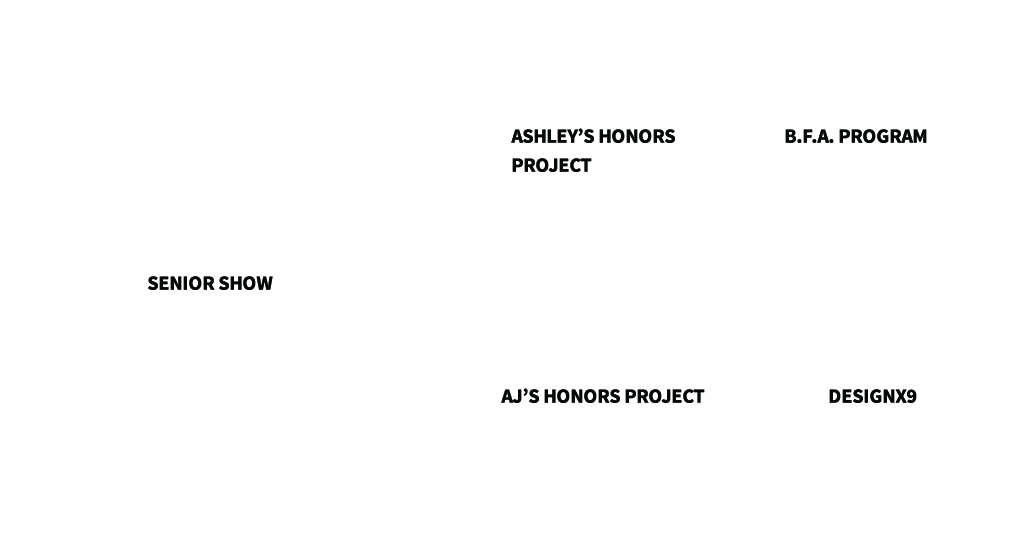
<style>
.page{position:relative;width:1024px;height:560px;background:#ffffff}
.page>*{position:absolute;margin:0}
.t1{font:20px/29px "SourceSansPro-Bold";color:#060808}
.t2{font:20px "SourceSansPro-Bold";color:#060808}
</style>
<div class="page">
<p class="t1" style="left:511px;top:128px;width:164px;height:44px">ASHLEY’S HONORS PROJECT</p>
<p class="t2" style="left:785px;top:129px;width:142px;height:14px">B.F.A. PROGRAM</p>
<p class="t2" style="left:148px;top:276px;width:125px;height:14px">SENIOR SHOW</p>
<p class="t2" style="left:501px;top:388px;width:204px;height:15px">AJ’S HONORS PROJECT</p>
<p class="t2" style="left:829px;top:389px;width:88px;height:14px">DESIGNX9</p>
</div>
